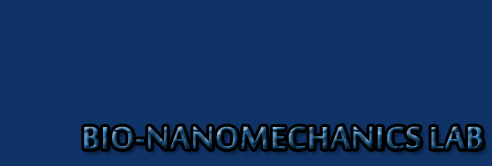
<style>
.page{position:relative;width:492px;height:166px;background:#0f3367}
.page>*{position:absolute;margin:0}
.t1{font:48px "MoolBoran";letter-spacing:-0.01em;font-weight:bold}
.t2{font:36px "TimesNewRomanPSMT"}
</style>
<div class="page">
<p class="t1" style="left:84px;top:126px;width:399px;height:23px"><span class="t2">                                                                       </span>BIO-NANOMECHANICS LAB</p>
</div>
